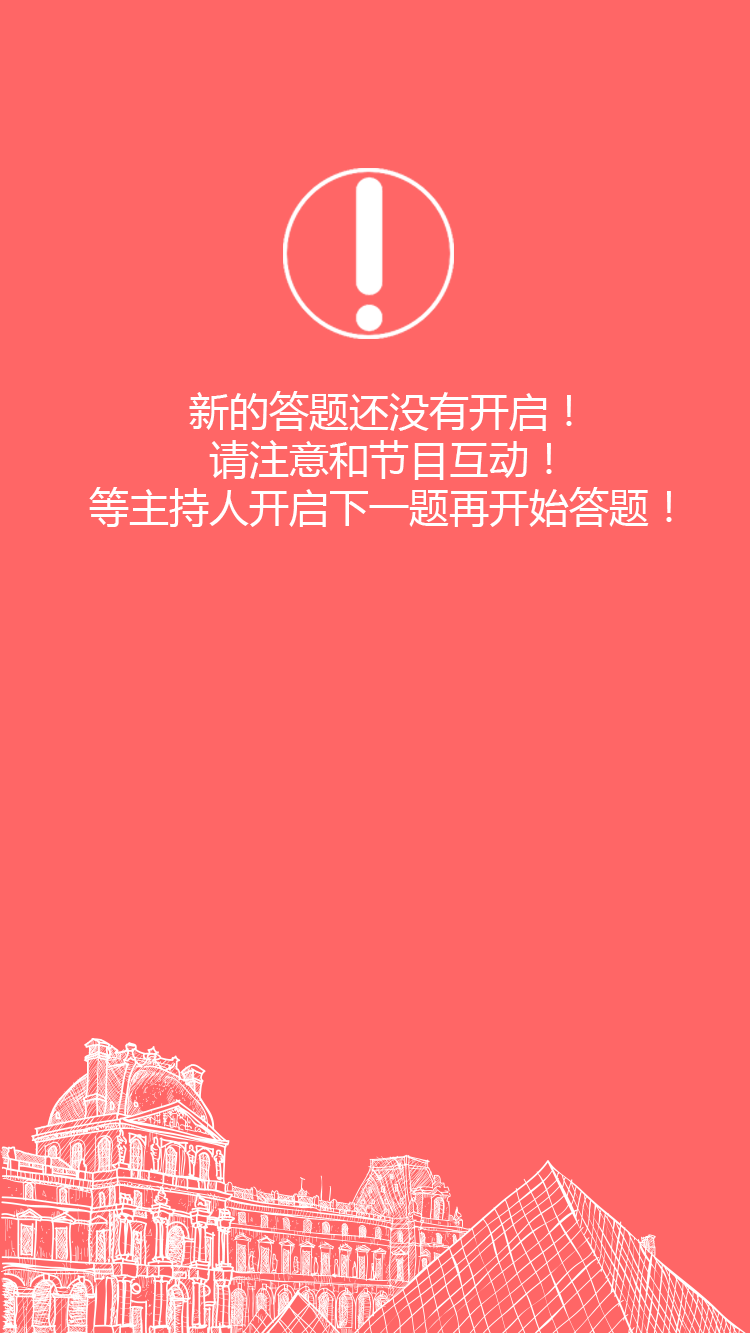
<style>
.page{position:relative;width:750px;height:1334px;background:#ff6666}
.page>*{position:absolute;margin:0}
.t1{font:40px "MicrosoftYaHei";color:#ffffff}
</style>
<div class="page">
<p class="t1" style="left:89px;top:391px;width:583px;height:136px;text-align:center">新的答题还没有开启！<br>请注意和节目互动！<br>等主持人开启下一题再开始答题！</p>
</div>
